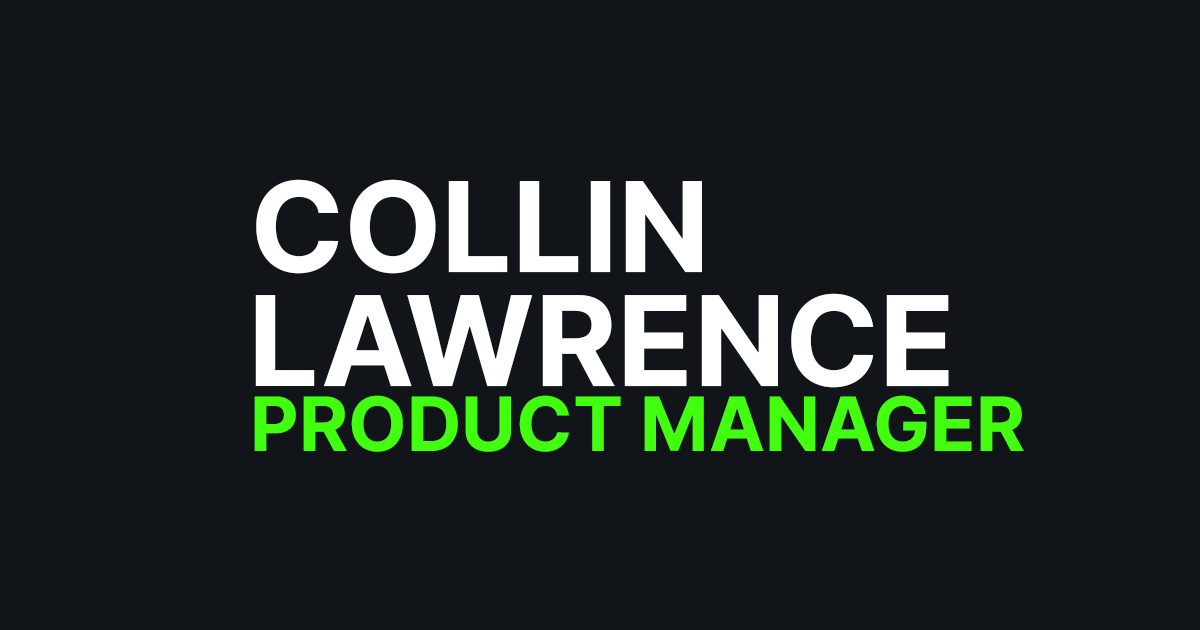
<style>
.page{position:relative;width:1200px;height:630px;background:#111519}
.page>*{position:absolute;margin:0}
.t1{font:125px "Inter-Bold";color:#ffffff}
.t2{font:75px "Inter-Bold";color:#42ff0f}
</style>
<div class="page">
<p class="t1" style="left:256px;top:179px;width:446px;height:95px">COLLIN</p>
<p class="t1" style="left:255px;top:293px;width:694px;height:95px">LAWRENCE</p>
<p class="t2" style="left:254px;top:395px;width:770px;height:57px">PRODUCT MANAGER</p>
</div>
